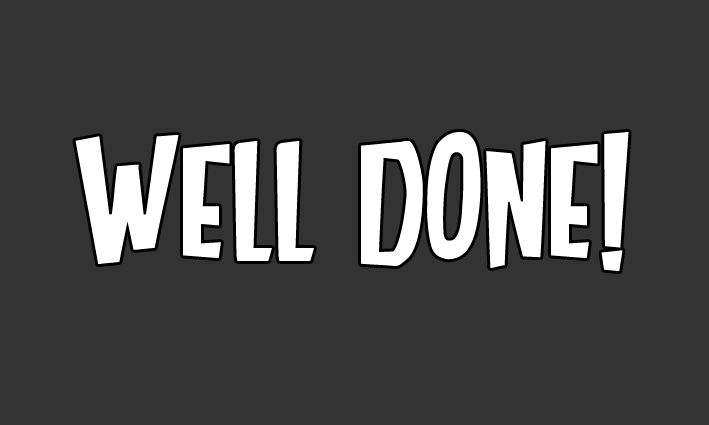
<style>
.page{position:relative;width:709px;height:425px;background:#333333}
.page>*{position:absolute;margin:0}
.t1{font:170px "DANCING-JUNGLE";color:#ffffff;text-transform:uppercase}
</style>
<div class="page">
<p class="t1" style="left:75px;top:132px;width:554px;height:139px">WELL DONE!</p>
</div>
